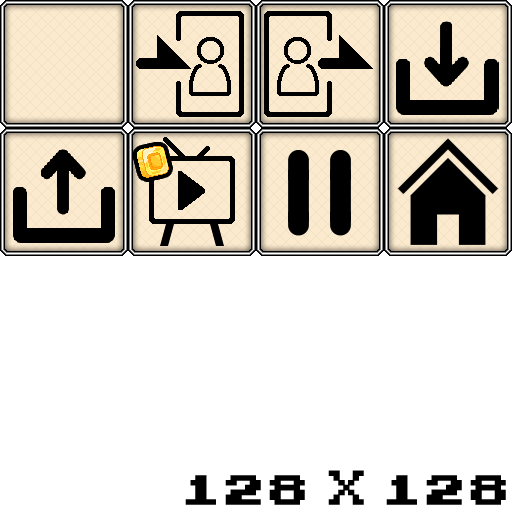
<style>
.page{position:relative;width:512px;height:512px;background:#ffffff}
.page>*{position:absolute;margin:0}
.t1{font:49px "PokemonGSC";color:#000000;font-weight:bold}
</style>
<div class="page">
<p class="t1" style="left:185px;top:470px;width:321px;height:35px">128 X 128</p>
</div>
